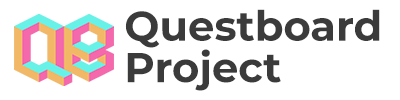
<style>
.page{position:relative;width:400px;height:100px;background:#ffffff}
.page>*{position:absolute;margin:0}
.t1{font:41.7px/41.7px "Montserrat-Bold";color:#3b3b3b}
</style>
<div class="page">
<p class="t1" style="left:125px;top:9px;width:255px;height:82px">Questboard<br>Project</p>
</div>
